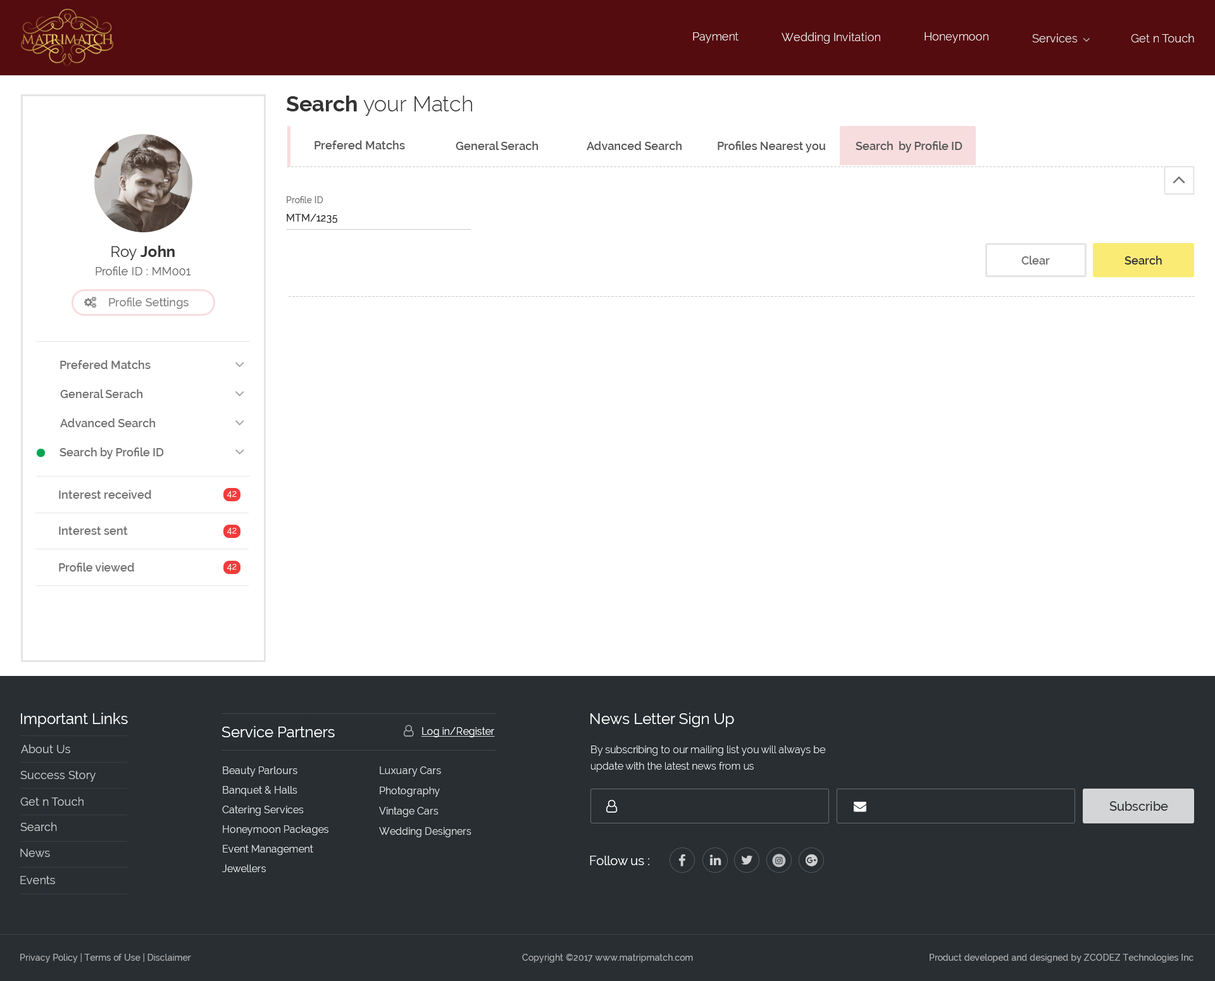
<style>
.page{position:relative;width:1215px;height:981px;background:#ffffff}
.page>*{position:absolute;margin:0}
.t1{font:11.4px "Raleway-Light";color:#ffffff}
.t2{font:21.5px "Raleway-Light";color:#333333}
.t3{font:21.5px "Raleway-Bold";color:#333333}
.t4{font:11.4px "Raleway-SemiBold";color:#555555}
.t5{font:8.9px "Raleway-Medium";color:#707070}
.t6{font:10.1px "Raleway-Medium";color:#202020}
.t7{font:15.2px "Raleway-Bold";color:#333333}
.t8{font:15.2px "Raleway";color:#333333}
.t9{font:11.4px "Raleway-SemiBold";color:#707070}
.t10{font:11.4px "Raleway-SemiBold";color:#333333}
.t11{font:11.4px "Raleway";color:#555555}
.t12{font:11.4px "Raleway-Medium";color:#808080}
.t13{font:8.9px "Raleway";color:#ffffff}
.t14{font:15.2px "Raleway";color:#ffffff}
.t15{font:10.1px "Raleway";color:#ffffff;text-decoration:underline}
.t16{font:11.4px "Raleway";color:#c6c7c8}
.t17{font:10.1px/16.5px "Raleway-Light";color:#ffffff}
.t18{font:10.1px/19.6px "Raleway";color:#e0e0e0}
.t19{font:10.1px/20.3px "Raleway";color:#e0e0e0}
.t20{font:12.7px "Raleway-Medium";color:#282e32}
.t21{font:12.7px "Raleway";color:#ffffff}
.t22{font:8.9px "Raleway-Medium";color:#abacad}
</style>
<div class="page">
<p class="t1" style="left:693px;top:32px;width:46px;height:11px">Payment</p>
<p class="t1" style="left:782px;top:32px;width:98px;height:12px">Wedding Invitation</p>
<p class="t1" style="left:925px;top:32px;width:64px;height:11px">Honeymoon</p>
<p class="t1" style="left:1032px;top:34px;width:45px;height:8px">Services</p>
<p class="t1" style="left:1131px;top:34px;width:63px;height:8px">Get n Touch</p>
<p class="t2" style="left:287px;top:96px;width:185px;height:20px"><span class="t3">Search </span>your Match</p>
<p class="t4" style="left:315px;top:141px;width:90px;height:8px">Prefered Matchs</p>
<p class="t4" style="left:456px;top:141px;width:82px;height:9px">General Serach</p>
<p class="t4" style="left:587px;top:141px;width:95px;height:9px">Advanced Search</p>
<p class="t4" style="left:718px;top:141px;width:108px;height:12px">Profiles Nearest you</p>
<p class="t4" style="left:856px;top:141px;width:107px;height:12px">Search  by Profile ID</p>
<p class="t5" style="left:287px;top:196px;width:36px;height:7px">Profile ID</p>
<p class="t6" style="left:287px;top:214px;width:50px;height:9px">MTM/1235</p>
<p class="t7" style="left:111px;top:246px;width:64px;height:14px"><span class="t8">Roy </span>John</p>
<p class="t9" style="left:1022px;top:256px;width:28px;height:9px">Clear</p>
<p class="t10" style="left:1125px;top:256px;width:37px;height:9px">Search</p>
<p class="t11" style="left:96px;top:266px;width:95px;height:9px">Profile ID : MM001</p>
<p class="t12" style="left:109px;top:298px;width:80px;height:11px">Profile Settings</p>
<p class="t9" style="left:60px;top:360px;width:91px;height:9px">Prefered Matchs</p>
<p class="t9" style="left:60px;top:389px;width:82px;height:9px">General Serach</p>
<p class="t9" style="left:60px;top:418px;width:95px;height:9px">Advanced Search</p>
<p class="t9" style="left:60px;top:448px;width:104px;height:11px">Search by Profile ID</p>
<p class="t9" style="left:59px;top:490px;width:92px;height:9px">Interest received</p>
<p class="t13" style="left:227px;top:491px;width:10px;height:7px">42</p>
<p class="t9" style="left:59px;top:527px;width:69px;height:8px">Interest sent</p>
<p class="t13" style="left:227px;top:528px;width:10px;height:7px">42</p>
<p class="t9" style="left:59px;top:563px;width:75px;height:9px">Profile viewed</p>
<p class="t13" style="left:227px;top:564px;width:10px;height:7px">42</p>
<p class="t14" style="left:21px;top:713px;width:107px;height:14px">Important Links</p>
<p class="t14" style="left:591px;top:713px;width:143px;height:14px">News Letter Sign Up</p>
<p class="t14" style="left:222px;top:726px;width:113px;height:11px">Service Partners</p>
<p class="t15" style="left:422px;top:727px;width:73px;height:10px">Log in/Register</p>
<p class="t16" style="left:21px;top:744px;width:49px;height:9px">About Us</p>
<p class="t17" style="left:591px;top:746px;width:235px;height:26px">By subscribing to our mailing list you will always be <br>update with the latest news from us</p>
<p class="t16" style="left:20px;top:771px;width:76px;height:11px">Success Story</p>
<p class="t18" style="left:222px;top:767px;width:107px;height:105px">Beauty Parlours<br>Banquet &amp; Halls<br>Catering Services<br>Honeymoon Packages<br>Event Management<br>Jewellers</p>
<p class="t19" style="left:379px;top:767px;width:93px;height:70px">Luxuary Cars<br>Photography<br>Vintage Cars<br>Wedding Designers</p>
<p class="t16" style="left:20px;top:797px;width:64px;height:9px">Get n Touch</p>
<p class="t20" style="left:1110px;top:801px;width:59px;height:10px">Subscribe</p>
<p class="t16" style="left:20px;top:822px;width:37px;height:9px">Search</p>
<p class="t16" style="left:20px;top:849px;width:30px;height:8px">News</p>
<p class="t21" style="left:590px;top:856px;width:59px;height:9px">Follow us :</p>
<p class="t16" style="left:20px;top:876px;width:35px;height:8px">Events</p>
<p class="t22" style="left:20px;top:953px;width:171px;height:10px">Privacy Policy | Terms of Use | Disclaimer</p>
<p class="t22" style="left:522px;top:954px;width:171px;height:9px">Copyright ©2017 www.matripmatch.com</p>
<p class="t22" style="left:930px;top:954px;width:264px;height:9px">Product developed and designed by ZCODEZ Technologies Inc</p>
</div>
